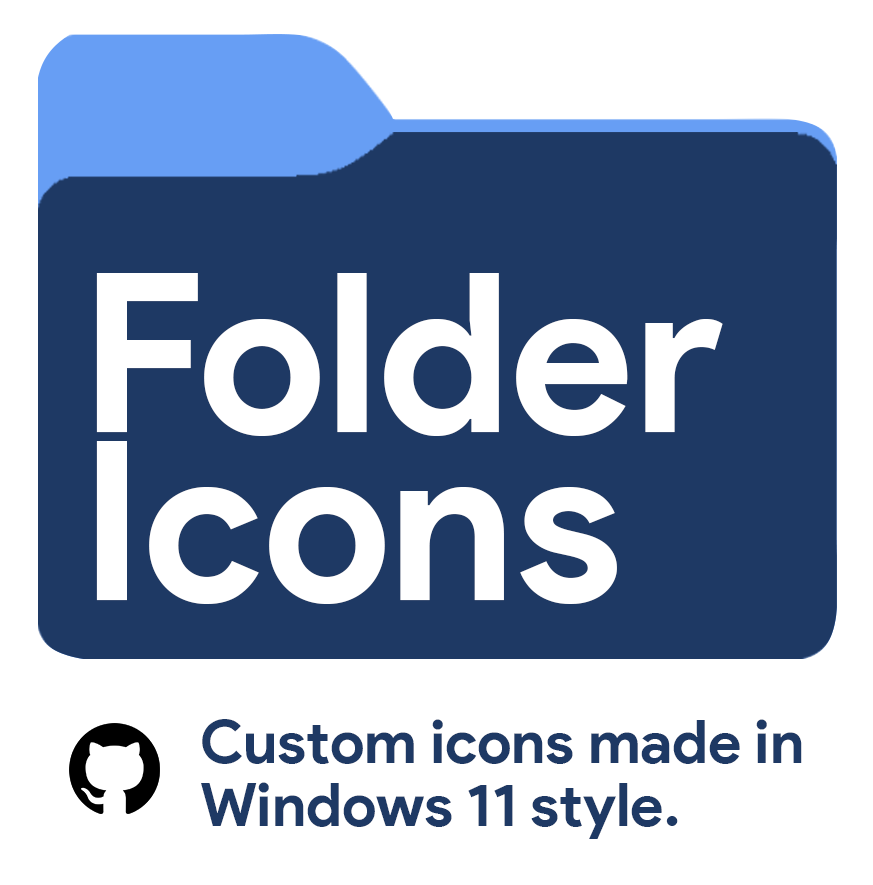
<style>
.page{position:relative;width:873px;height:885px;background:#ffffff}
.page>*{position:absolute;margin:0}
.t1{font:222px/168px "ProductSans-Bold";color:#ffffff}
.t2{font:60px/63px "ProductSans-Bold";color:#1e3964}
</style>
<div class="page">
<p class="t1" style="left:96px;top:273px;width:627px;height:331px">Folder<br>Icons</p>
<p class="t2" style="left:201px;top:719px;width:601px;height:120px">Custom icons made in<br>Windows 11 style.</p>
</div>
